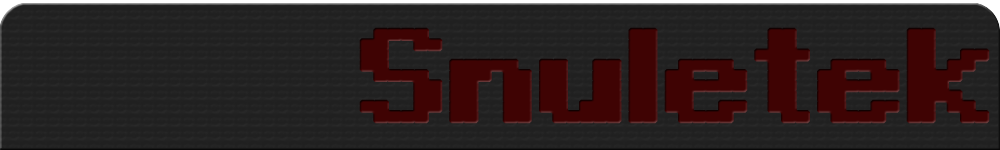
<style>
.page{position:relative;width:1000px;height:150px;background:#212121}
.page>*{position:absolute;margin:0}
.t1{font:130px "DisplayOTF";letter-spacing:-0.05em;color:#3f0303;font-weight:bold;scale:1.3 1}
</style>
<div class="page">
<p class="t1" style="left:359px;top:27px;width:631px;height:97px">Snuletek</p>
</div>
